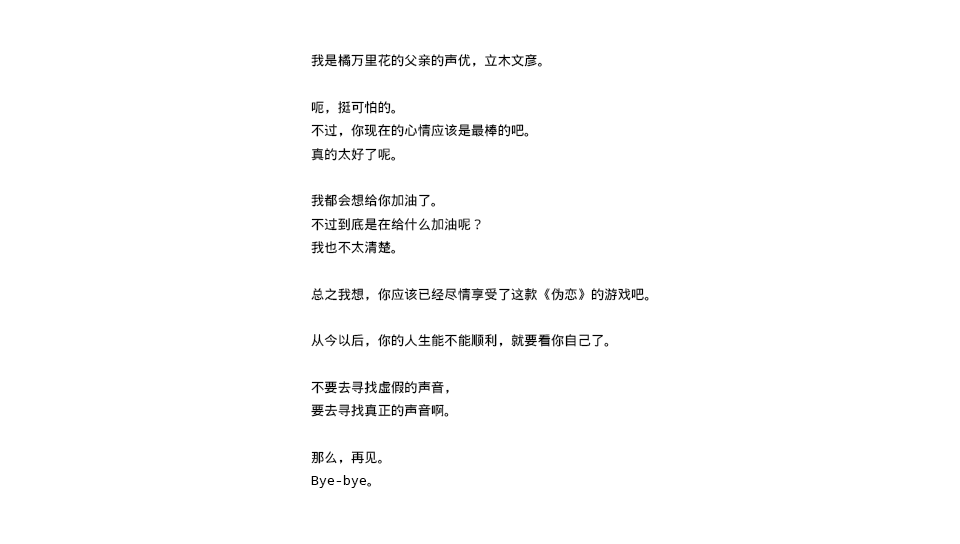
<style>
.page{position:relative;width:960px;height:544px;background:#ffffff}
.page>*{position:absolute;margin:0}
.t1{font:13.3px "WenQuanYiMicroHeiMono";color:#000000}
</style>
<div class="page">
<p class="t1" style="left:311px;top:54px;width:338px;height:434px">我是橘万里花的父亲的声优，立木文彦。<br><br>呃，挺可怕的。<br>不过，你现在的心情应该是最棒的吧。<br>真的太好了呢。<br><br>我都会想给你加油了。<br>不过到底是在给什么加油呢？<br>我也不太清楚。<br><br>总之我想，你应该已经尽情享受了这款《伪恋》的游戏吧。<br><br>从今以后，你的人生能不能顺利，就要看你自己了。<br><br>不要去寻找虚假的声音，<br>要去寻找真正的声音啊。<br><br>那么，再见。<br>Bye-bye。</p>
</div>
